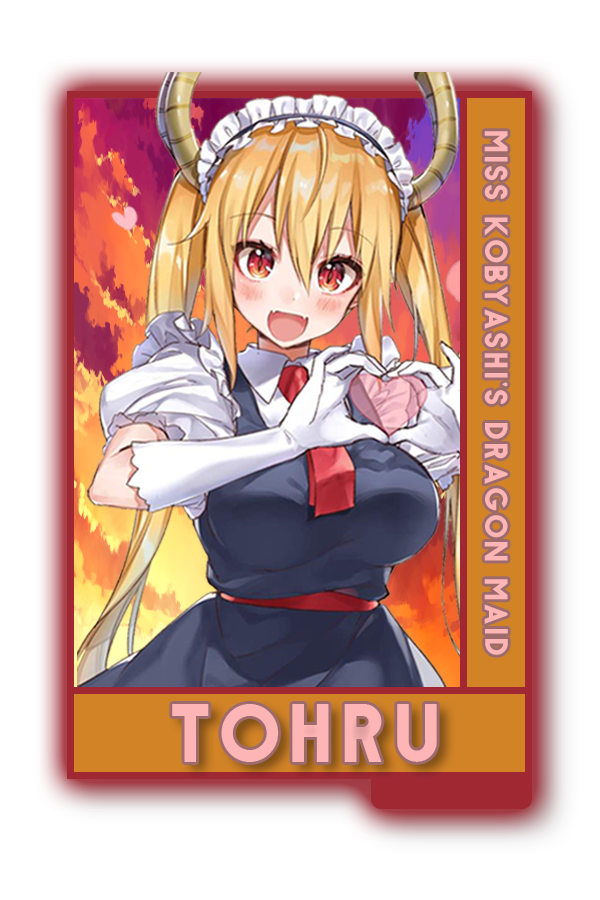
<style>
.page{position:relative;width:600px;height:900px;background:#ffffff}
.page>*{position:absolute;margin:0}
.t1{font:29.2px "Antraste";color:#feb5b5}
.t2{font:75px "Antraste";color:#feb5b5}
</style>
<div class="page">
<p class="t1" style="left:484px;top:131px;width:24px;height:524px;rotate:90deg">MISS KOBYASHI'S DRAGON MAID</p>
<p class="t2" style="left:172px;top:704px;width:265px;height:58px">TOHRU</p>
</div>
